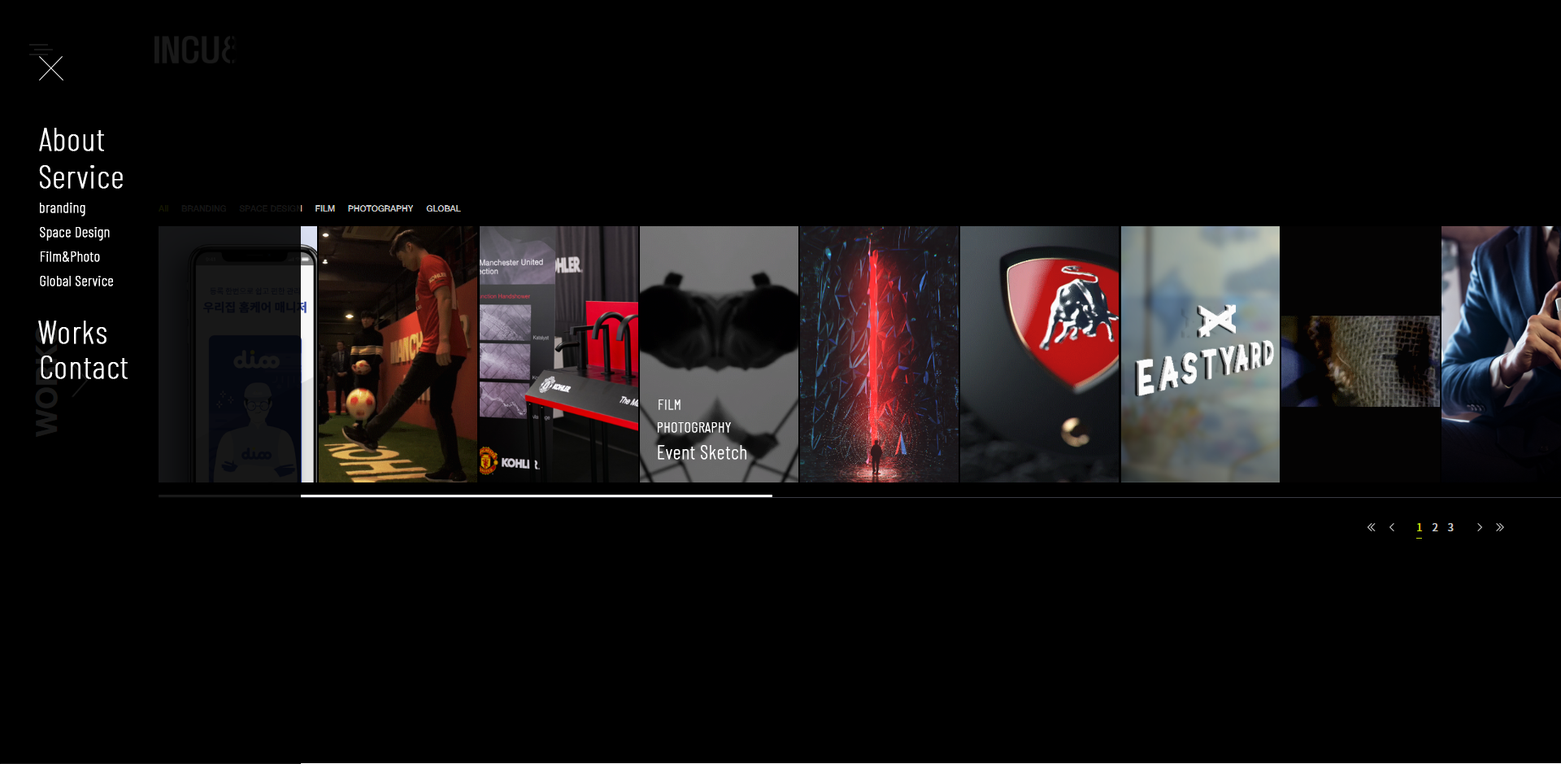
<style>
.page{position:relative;width:1561px;height:764px;background:#000000}
.page>*{position:absolute;margin:0}
.t1{font:32.5px "BarlowCondensed-Thin";letter-spacing:0.01em;color:#ffffff;font-weight:bold}
.t2{font:14.6px "BarlowCondensed-Thin";letter-spacing:0.01em;color:#ffffff;font-weight:bold}
.t3{font:19.5px "BarlowCondensed-Thin";letter-spacing:0.01em;color:#ffffff;font-weight:bold}
</style>
<div class="page">
<p class="t1" style="left:39px;top:128px;width:65px;height:23px">About</p>
<p class="t1" style="left:39px;top:165px;width:84px;height:24px">Service</p>
<p class="t2" style="left:40px;top:203px;width:45px;height:13px">branding</p>
<p class="t2" style="left:40px;top:227px;width:70px;height:14px">Space Design</p>
<p class="t2" style="left:41px;top:251px;width:59px;height:11px">Film&amp;Photo</p>
<p class="t2" style="left:40px;top:276px;width:73px;height:10px">Global Service</p>
<p class="t1" style="left:38px;top:320px;width:69px;height:24px">Works</p>
<p class="t1" style="left:41px;top:355px;width:87px;height:24px">Contact</p>
<p class="t2" style="left:659px;top:399px;width:22px;height:11px">FILM</p>
<p class="t2" style="left:658px;top:422px;width:73px;height:11px">PHOTOGRAPHY</p>
<p class="t3" style="left:658px;top:445px;width:89px;height:14px">Event Sketch</p>
</div>
